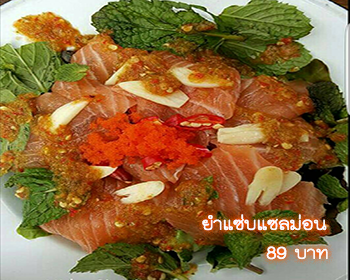
<style>
.page{position:relative;width:350px;height:280px}
.page>*{position:absolute;margin:0}
.t1{font:24px "THKodchasal";color:#ffffff}
</style>
<div class="page">
<p class="t1" style="left:202px;top:214px;width:126px;height:46px;text-align:right">ยำแซ่บแซลม่อน<br>บาท 89</p>
</div>
